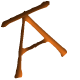
<style>
.page{position:relative;width:80px;height:80px;background:#ffffff}
.page>*{position:absolute;margin:0}
.t1{font:96.5px "TempusSansITC";color:#52290b;scale:1.55 1}
.t2{font:80px "TempusSansITC"}
</style>
<div class="page">
<p class="t1" style="left:1px;top:1px;width:49px;height:27px;rotate:-25deg">-</p>
<p class="t2" style="left:14px;top:10px;width:53px;height:69px;rotate:-24deg">A</p>
</div>
